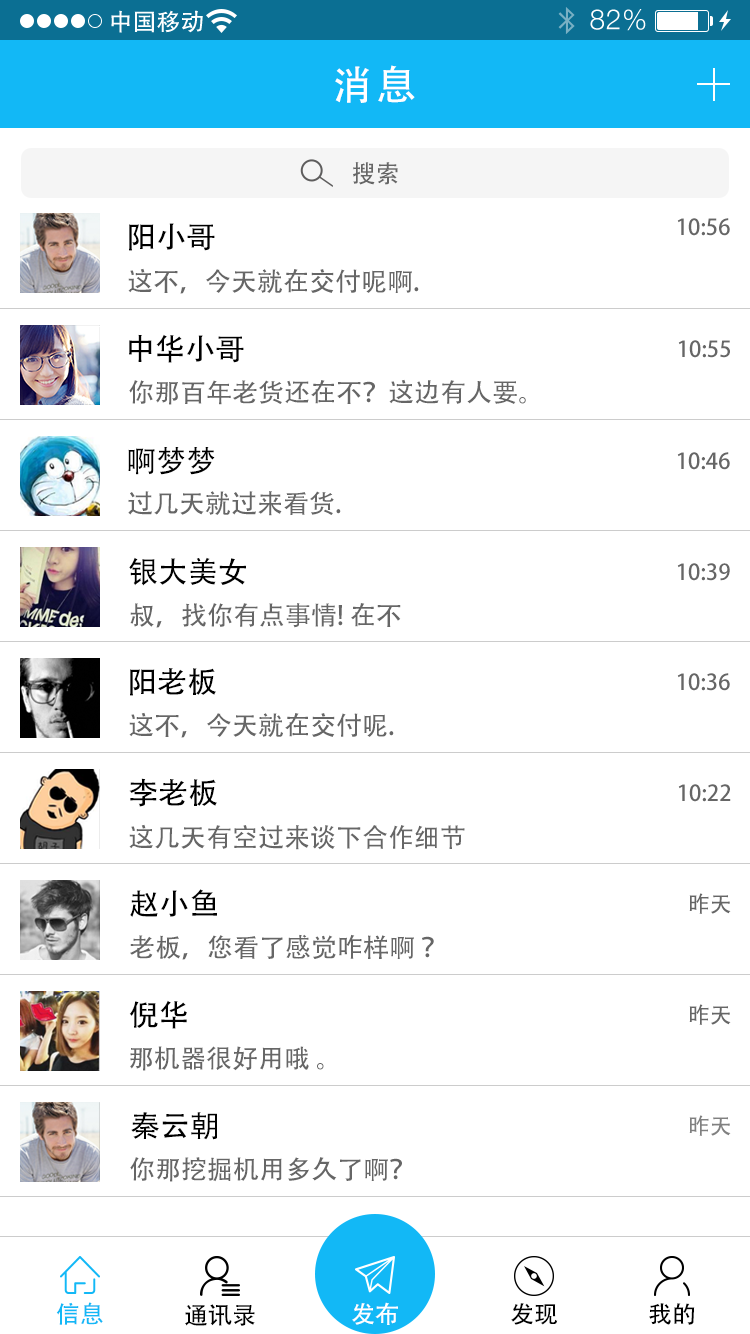
<style>
.page{position:relative;width:750px;height:1334px;background:#ffffff}
.page>*{position:absolute;margin:0}
.t1{font:40px "AdobeHeitiStd-Regular";letter-spacing:0.104em;color:#ffffff}
.t2{font:24px "AdobeHeitiStd-Regular";color:#666666}
.t3{font:22px "AdobeHeitiStd-Regular";color:#666666}
.t4{font:30px "AdobeHeitiStd-Regular";color:#000000}
.t5{font:26px "AdobeHeitiStd-Regular";color:#666666}
.t6{font:22px "AdobeHeitiStd-Regular";color:#808080}
.t7{font:24px "AdobeHeitiStd-Regular";color:#12b8f6}
.t8{font:24px "AdobeHeitiStd-Regular";color:#ffffff}
.t9{font:24px "AdobeHeitiStd-Regular";color:#000000}
</style>
<div class="page">
<p class="t1" style="left:335px;top:65px;width:80px;height:38px">消息</p>
<p class="t2" style="left:353px;top:162px;width:45px;height:23px">搜索</p>
<p class="t3" style="left:677px;top:218px;width:53px;height:18px">10:56</p>
<p class="t4" style="left:129px;top:223px;width:86px;height:28px">阳小哥</p>
<p class="t5" style="left:128px;top:268px;width:291px;height:26px">这不，今天就在交付呢啊.</p>
<p class="t4" style="left:129px;top:334px;width:115px;height:29px">中华小哥</p>
<p class="t3" style="left:678px;top:340px;width:52px;height:18px">10:55</p>
<p class="t5" style="left:129px;top:379px;width:397px;height:26px">你那百年老货还在不？这边有人要。</p>
<p class="t4" style="left:128px;top:447px;width:87px;height:28px">啊梦梦</p>
<p class="t3" style="left:677px;top:452px;width:53px;height:18px">10:46</p>
<p class="t5" style="left:128px;top:491px;width:213px;height:25px">过几天就过来看货.</p>
<p class="t4" style="left:129px;top:557px;width:117px;height:29px">银大美女</p>
<p class="t3" style="left:677px;top:563px;width:53px;height:18px">10:39</p>
<p class="t5" style="left:130px;top:603px;width:271px;height:25px">叔，找你有点事情! 在不</p>
<p class="t4" style="left:130px;top:668px;width:86px;height:28px">阳老板</p>
<p class="t3" style="left:677px;top:673px;width:53px;height:18px">10:36</p>
<p class="t5" style="left:129px;top:712px;width:265px;height:26px">这不，今天就在交付呢.</p>
<p class="t4" style="left:129px;top:778px;width:88px;height:29px">李老板</p>
<p class="t3" style="left:678px;top:784px;width:53px;height:18px">10:22</p>
<p class="t5" style="left:129px;top:824px;width:336px;height:26px">这几天有空过来谈下合作细节</p>
<p class="t4" style="left:130px;top:889px;width:87px;height:28px">赵小鱼</p>
<p class="t3" style="left:689px;top:893px;width:42px;height:21px">昨天</p>
<p class="t5" style="left:130px;top:934px;width:304px;height:26px">老板，您看了感觉咋样啊 ？</p>
<p class="t4" style="left:129px;top:1000px;width:58px;height:29px">倪华</p>
<p class="t3" style="left:689px;top:1004px;width:42px;height:21px">昨天</p>
<p class="t5" style="left:130px;top:1046px;width:194px;height:25px">那机器很好用哦 。</p>
<p class="t4" style="left:131px;top:1112px;width:86px;height:28px">秦云朝</p>
<p class="t6" style="left:689px;top:1115px;width:42px;height:21px">昨天</p>
<p class="t5" style="left:130px;top:1157px;width:272px;height:25px">你那挖掘机用多久了啊？</p>
<p class="t7" style="left:56px;top:1302px;width:47px;height:23px">信息</p>
<p class="t8" style="left:352px;top:1302px;width:46px;height:23px">发布</p>
<p class="t9" style="left:185px;top:1304px;width:70px;height:22px">通讯录</p>
<p class="t9" style="left:511px;top:1303px;width:47px;height:22px">发现</p>
<p class="t9" style="left:649px;top:1303px;width:46px;height:22px">我的</p>
</div>
